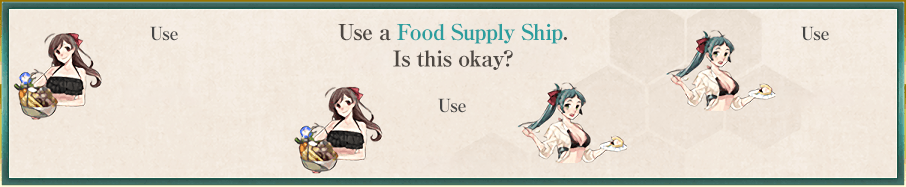
<style>
.page{position:relative;width:906px;height:187px}
.page>*{position:absolute;margin:0}
.t1{font:18px "RyuminPro-ExBold";letter-spacing:-0.04em;color:#464646}
.t2{font:22px "RyuminPro-ExBold";letter-spacing:-0.04em;color:#2b9e9e}
.t3{font:22px "RyuminPro-ExBold";letter-spacing:-0.04em;color:#4d4742}
</style>
<div class="page">
<p class="t1" style="left:150px;top:26px;width:28px;height:15px">Use</p>
<p class="t2" style="left:338px;top:23px;width:229px;height:47px;text-align:center"><span class="t3">Use a </span>Food Supply Ship<span class="t3">.<br>Is this okay?</span></p>
<p class="t1" style="left:801px;top:26px;width:28px;height:15px">Use</p>
<p class="t1" style="left:438px;top:98px;width:28px;height:15px">Use</p>
</div>
